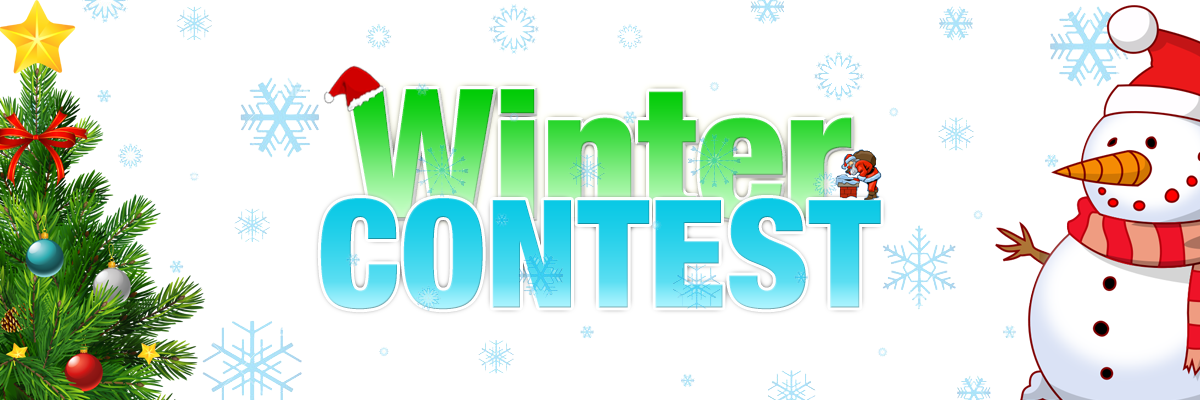
<style>
.page{position:relative;width:1200px;height:400px;background:#ffffff}
.page>*{position:absolute;margin:0}
.t1{font:180.3px "HelveticaNeue-CondensedBlack"}
.t2{font:150.3px "HelveticaNeue-CondensedBlack"}
</style>
<div class="page">
<p class="t1" style="left:349px;top:89px;width:503px;height:131px">Winter</p>
<p class="t2" style="left:320px;top:198px;width:561px;height:112px">CONTEST</p>
</div>
